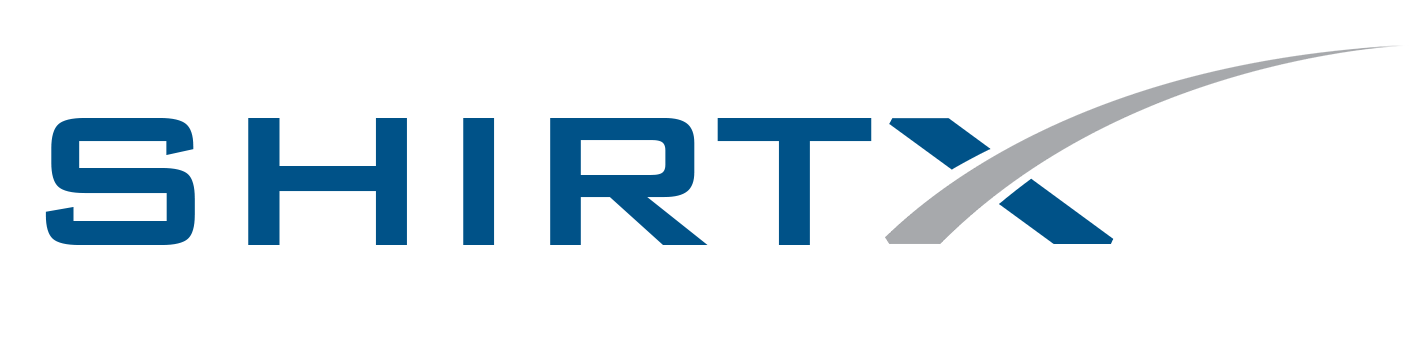
<style>
.page{position:relative;width:1411px;height:356px;background:#ffffff}
.page>*{position:absolute;margin:0}
.t1{font:300px "BankGothicBT-Medium";color:#005288}
</style>
<div class="page">
<p class="t1" style="left:45px;top:118px;width:827px;height:127px">shirt</p>
</div>
